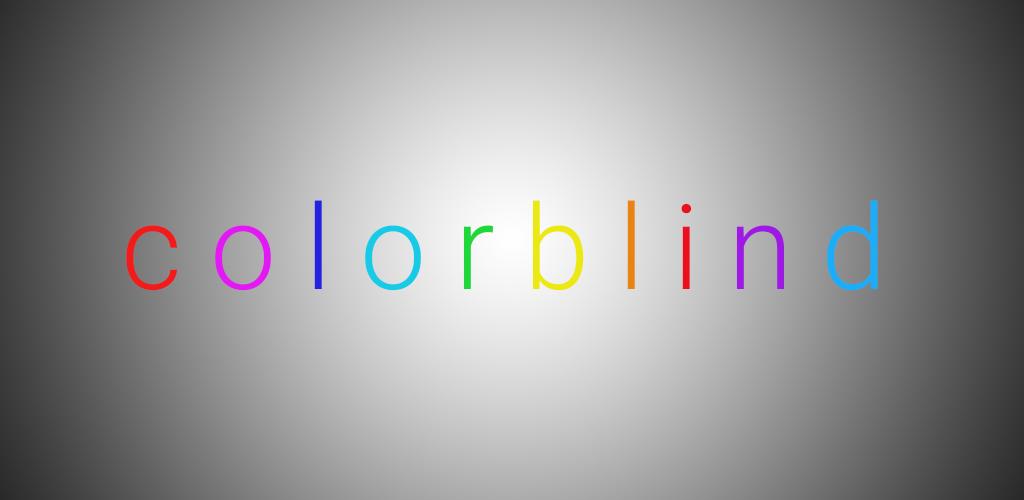
<style>
.page{position:relative;width:1024px;height:500px}
.page>*{position:absolute;margin:0}
.t1{font:118.1px "Roboto-Light";color:#f21b1b}
.t2{font:118.1px "Roboto-Light";color:#e11af3}
.t3{font:118.1px "Roboto-Light";color:#2222df}
.t4{font:118.1px "Roboto-Light";color:#17cbe6}
.t5{font:118.1px "Roboto-Light";color:#20d73a}
.t6{font:118.1px "Roboto-Light";color:#ebe814}
.t7{font:118.1px "Roboto-Light";color:#e8840f}
.t8{font:118.1px "Roboto-Light";color:#ec101f}
.t9{font:118.1px "Roboto-Light";color:#9e19e3}
.t10{font:118.1px "Roboto-Light";color:#1badf8}
</style>
<div class="page">
<p class="t1" style="left:126px;top:200px;width:752px;height:91px">c <span class="t2">o </span><span class="t3">l </span><span class="t4">o </span><span class="t5">r </span><span class="t6">b </span><span class="t7">l </span><span class="t8">i </span><span class="t9">n </span><span class="t10">d</span></p>
</div>
